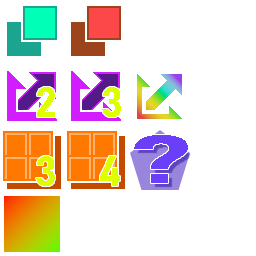
<style>
.page{position:relative;width:256px;height:256px;background:#ffffff}
.page>*{position:absolute;margin:0}
.t1{font:41.7px "Bahnschrift-Bold";color:#deff00;font-weight:bold}
.t2{font:66.7px "Bahnschrift-Bold";color:#6b3ffa;font-weight:bold;scale:2 1}
</style>
<div class="page">
<p class="t1" style="left:37px;top:87px;width:18px;height:30px">2</p>
<p class="t2" style="left:134px;top:135px;width:54px;height:48px">?</p>
<p class="t1" style="left:100px;top:156px;width:20px;height:30px">4</p>
</div>
